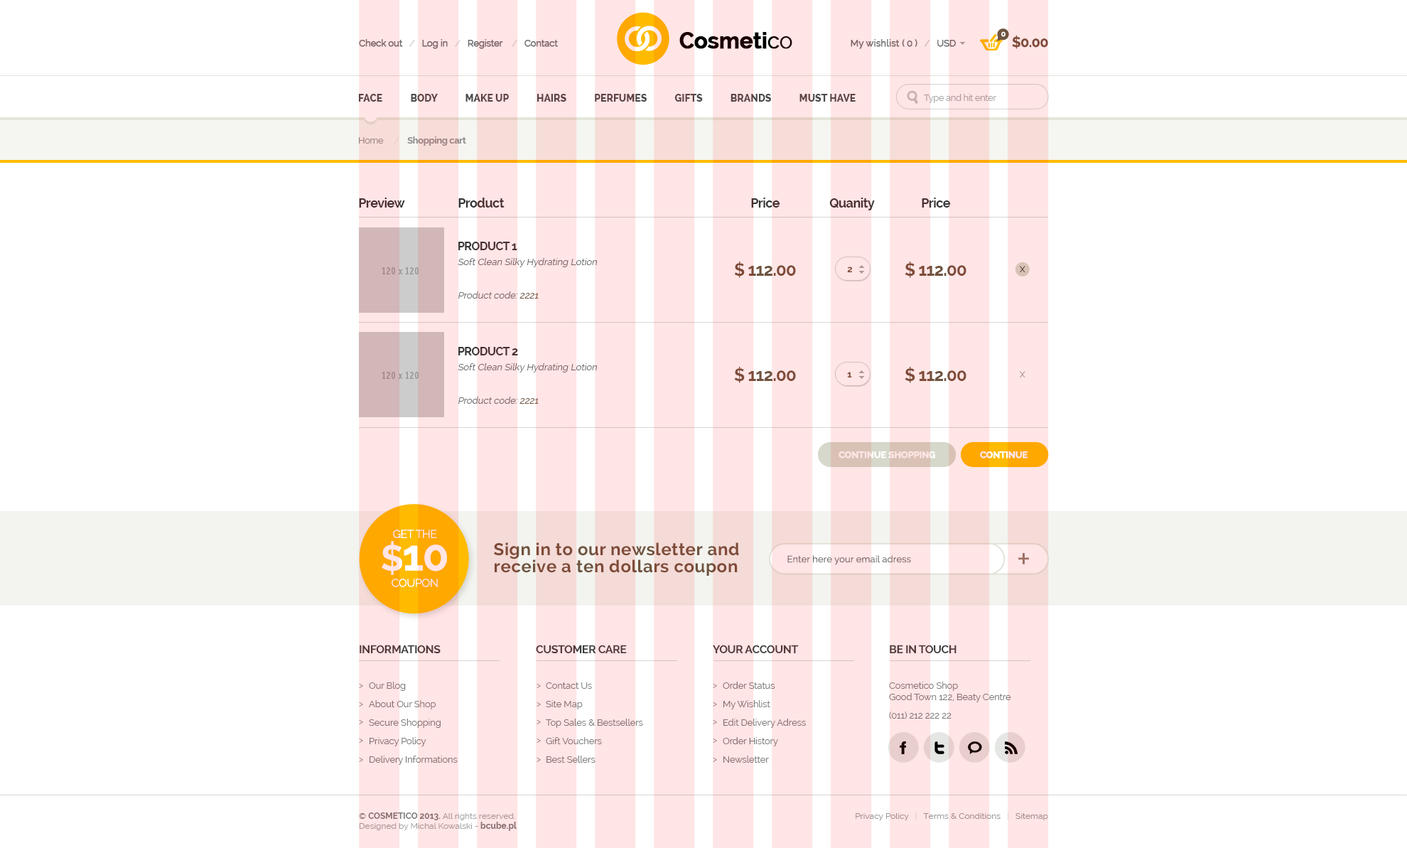
<style>
.page{position:relative;width:1407px;height:848px;background:#ffffff}
.page>*{position:absolute;margin:0}
.t1{font:9.2px "Raleway";letter-spacing:-0.03em;color:#727272;font-weight:bold}
.t2{font:9.2px "Raleway";letter-spacing:-0.03em;color:#d5d5d5;font-weight:bold}
.t3{font:9.2px "Raleway";letter-spacing:-0.03em;color:#dcdcdc;font-weight:bold}
.t4{font:22.3px "Raleway-Bold";letter-spacing:-0.025em;font-weight:bold}
.t5{font:22.3px "Raleway";letter-spacing:-0.025em;font-weight:bold}
.t6{font:22.3px "Raleway-Light";letter-spacing:-0.025em;font-weight:bold}
.t7{font:9.2px "Raleway";color:#727272;font-weight:bold}
.t8{font:7.7px "Raleway-Bold";letter-spacing:-0.03em;color:#ffffff}
.t9{font:14.2px "Raleway-Bold";letter-spacing:-0.03em;color:#70543f}
.t10{font:9.9px "Raleway-ExtraBold";color:#4b4b4b}
.t11{font:9.2px "Raleway";letter-spacing:-0.03em;color:#a8a8a8}
.t12{font:9.2px "Raleway-Bold";letter-spacing:-0.03em;color:#8f8f8f}
.t13{font:9.2px "Raleway";letter-spacing:-0.03em;color:#8f8f8f}
.t14{font:9.2px "Raleway";letter-spacing:-0.03em;color:#e3e6db}
.t15{font:12.8px "Raleway-Bold";letter-spacing:-0.03em;color:#353535}
.t16{font:9.2px "Raleway";color:#6e6e6e;font-style:italic}
.t17{font:11.4px/4.4px "Raleway-Bold";letter-spacing:-0.03em;color:#353535}
.t18{font:17.1px "Raleway-Bold";letter-spacing:-0.03em;color:#70543f}
.t19{font:9.2px "Raleway-Bold";color:#70543f}
.t20{font:11.4px "Raleway-Bold";letter-spacing:-0.03em;color:#353535}
.t21{font:9.2px "Raleway";color:#70543f;font-style:italic}
.t22{font:9.2px "Raleway-Bold";letter-spacing:-0.03em;color:#ffe5e5;text-transform:uppercase;font-weight:bold}
.t23{font:9.2px "Raleway-Bold";letter-spacing:-0.03em;text-transform:uppercase;font-weight:bold}
.t24{font:11.3px/30.1px "Raleway";letter-spacing:-0.03em;color:#ffe5e5}
.t25{font:36px/32.6px "Raleway-Bold";letter-spacing:-0.03em;color:#ffe5e5}
.t26{font:43.2px/32.6px "Raleway-Bold";letter-spacing:-0.03em;color:#ffe5e5}
.t27{font:11.3px/16.3px "Raleway";letter-spacing:-0.03em;color:#ffe5e5}
.t28{font:17.1px/17.1px "Raleway-Bold";letter-spacing:0.025em;color:#70543f}
.t29{font:9.2px "Raleway";letter-spacing:0.01em;color:#717171}
.t30{font:11.4px "Raleway-Bold";letter-spacing:-0.03em;color:#3f3f3f}
.t31{font:9.2px/18.5px "Raleway";letter-spacing:-0.01em;color:#7b7b7b}
.t32{font:9.2px "Raleway";letter-spacing:-0.01em;color:#7b7b7b}
.t33{font:8.5px "Raleway";color:#a1a1a1}
.t34{font:8.5px "Raleway";color:#7b7b7b}
.t35{font:8.5px "Raleway-Bold";color:#7b7b7b}
.t36{font:8.5px "Raleway";color:#a3a3a3}
.t37{font:8.5px "Raleway";color:#999999}
.t38{font:8.5px "Raleway";color:#e0e0e0}
.t39{font:8.5px "Raleway";color:#e4e4e4}
</style>
<div class="page">
<p class="t1" style="left:359px;top:39px;width:199px;height:10px">Check out   <span class="t2">/</span>   Log in   <span class="t3">/</span>   Register    <span class="t3">/</span>   Contact</p>
<p class="t4" style="left:679px;top:32px;width:113px;height:17px">Cosmeti<span class="t5">c</span><span class="t6">o</span></p>
<p class="t7" style="left:850px;top:39px;width:106px;height:10px">My wishlist <span class="t1">( 0 )   </span><span class="t2">/</span><span class="t1">   USD</span></p>
<p class="t8" style="left:1001px;top:31px;width:4px;height:6px">0</p>
<p class="t9" style="left:1012px;top:35px;width:36px;height:14px">$0.00</p>
<p class="t10" style="left:359px;top:94px;width:496px;height:8px">FACE            BODY            MAKE UP            HAIRS            PERFUMES            GIFTS            BRANDS            MUST HAVE</p>
<p class="t11" style="left:924px;top:94px;width:72px;height:9px">Type and hit enter</p>
<p class="t12" style="left:359px;top:136px;width:107px;height:10px"><span class="t13">Home     </span><span class="t14">/    </span>Shopping cart</p>
<p class="t15" style="left:359px;top:198px;width:46px;height:9px">Preview</p>
<p class="t15" style="left:458px;top:198px;width:46px;height:9px">Product</p>
<p class="t15" style="left:751px;top:198px;width:29px;height:9px">Price</p>
<p class="t15" style="left:829px;top:198px;width:46px;height:12px">Quanity</p>
<p class="t15" style="left:922px;top:198px;width:29px;height:9px">Price</p>
<p class="t16" style="left:458px;top:242px;width:140px;height:25px"><span class="t17">PRODUCT 1<br><br></span>Soft Clean Silky Hydrating Lotion</p>
<p class="t18" style="left:734px;top:261px;width:62px;height:17px">$ 112.00</p>
<p class="t19" style="left:847px;top:266px;width:6px;height:6px">2</p>
<p class="t18" style="left:904px;top:261px;width:62px;height:17px">$ 112.00</p>
<p class="t16" style="left:458px;top:291px;width:81px;height:7px"><span class="t20"><br></span>Product code: <span class="t21">2221</span></p>
<p class="t16" style="left:458px;top:347px;width:140px;height:25px"><span class="t17">PRODUCT 2<br><br></span>Soft Clean Silky Hydrating Lotion</p>
<p class="t18" style="left:734px;top:367px;width:62px;height:16px">$ 112.00</p>
<p class="t19" style="left:847px;top:372px;width:5px;height:5px">1</p>
<p class="t18" style="left:904px;top:367px;width:62px;height:16px">$ 112.00</p>
<p class="t16" style="left:458px;top:396px;width:81px;height:8px"><span class="t20"><br></span>Product code: <span class="t21">2221</span></p>
<p class="t22" style="left:838px;top:451px;width:98px;height:7px">CONTINUE SHOPPING</p>
<p class="t23" style="left:980px;top:451px;width:48px;height:7px">CONTINUE</p>
<p class="t24" style="left:382px;top:529px;width:65px;height:58px;text-align:center">GET THE<br><span class="t25">$</span><span class="t26">10<br></span><span class="t27">COUPON</span></p>
<p class="t28" style="left:494px;top:542px;width:245px;height:34px">Sign in to our newsletter and<br>receive a ten dollars coupon</p>
<p class="t29" style="left:787px;top:555px;width:124px;height:10px">Enter here your email adress</p>
<p class="t30" style="left:360px;top:644px;width:81px;height:10px">INFORMATIONS</p>
<p class="t30" style="left:536px;top:644px;width:91px;height:10px">CUSTOMER CARE</p>
<p class="t30" style="left:713px;top:644px;width:86px;height:9px">YOUR ACCOUNT</p>
<p class="t30" style="left:890px;top:644px;width:66px;height:9px">BE IN TOUCH</p>
<p class="t31" style="left:369px;top:681px;width:89px;height:83px">Our Blog<br>About Our Shop<br>Secure Shopping<br>Privacy Policy<br>Delivery Informations</p>
<p class="t31" style="left:546px;top:682px;width:97px;height:80px">Contact Us<br>Site Map<br>Top Sales &amp; Bestsellers<br>Gift Vouchers<br>Best Sellers</p>
<p class="t31" style="left:723px;top:681px;width:83px;height:81px">Order Status<br>My Wishlist<br>Edit Delivery Adress<br>Order History<br>Newsletter</p>
<p class="t32" style="left:889px;top:681px;width:122px;height:38px"><span class="t31">Cosmetico Shop</span><br>Good Town 122, Beaty Centre<br><span class="t31">(011) 212 222 22</span></p>
<p class="t33" style="left:359px;top:812px;width:158px;height:19px"><span class="t34">© </span><span class="t35">COSMETICO 2013. </span><span class="t36">All rights reserved.<br></span>Designed by Michal Kowalski - <span class="t35">bcube.pl</span></p>
<p class="t37" style="left:855px;top:812px;width:193px;height:8px">Privacy Policy   <span class="t38">|</span>   Terms &amp; Conditions   <span class="t39">|</span>   Sitemap</p>
</div>
